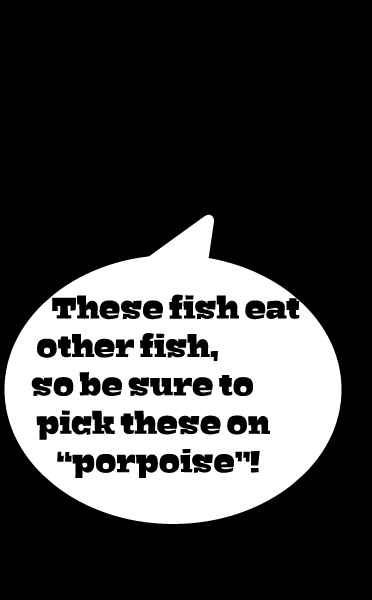
<style>
.page{position:relative;width:372px;height:600px;background:#000000}
.page>*{position:absolute;margin:0}
.t1{font:32px "Bigfish-Black";color:#000000}
</style>
<div class="page">
<p class="t1" style="left:31px;top:294px;width:269px;height:184px">These fish eat   <br>  other fish, <br> so be sure to <br>  pick these on<br>      “porpoise”!</p>
</div>
